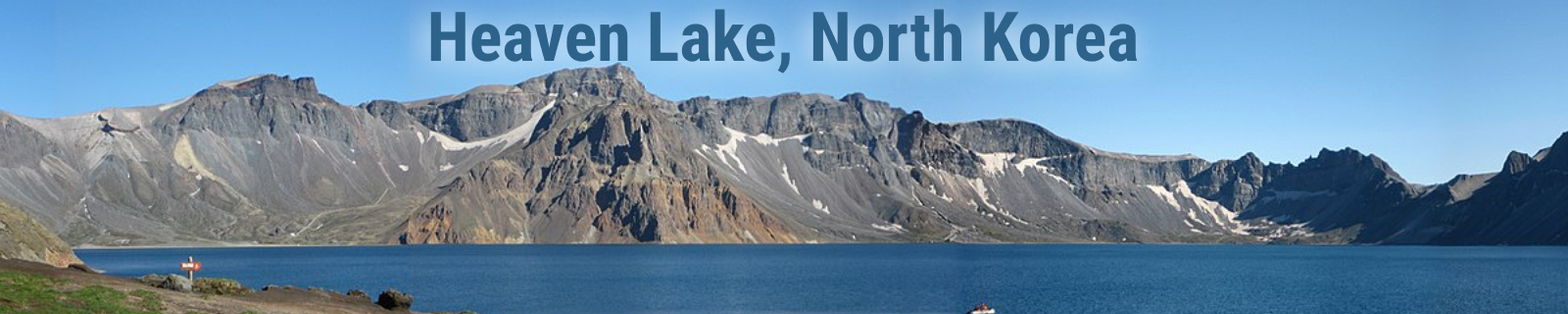
<style>
.page{position:relative;width:1568px;height:314px}
.page>*{position:absolute;margin:0}
.t1{font:68.6px "RobotoCondensed-Bold";color:#2d628a}
</style>
<div class="page">
<p class="t1" style="left:430px;top:9px;width:708px;height:65px">Heaven Lake, North Korea</p>
</div>
